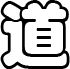
<style>
.page{position:relative;width:70px;height:69px;background:#ffffff}
.page>*{position:absolute;margin:0}
.t1{font:72px "STCaiyun";color:#000000}
</style>
<div class="page">
<p class="t1" style="left:0px;top:0px;width:70px;height:69px">道</p>
</div>
